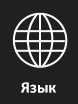
<style>
.page{position:relative;width:78px;height:104px;background:#202020}
.page>*{position:absolute;margin:0}
.t1{font:12px "Calibri-Bold";color:#ffffff}
</style>
<div class="page">
<p class="t1" style="left:21px;top:82px;width:35px;height:11px">Язык</p>
</div>
